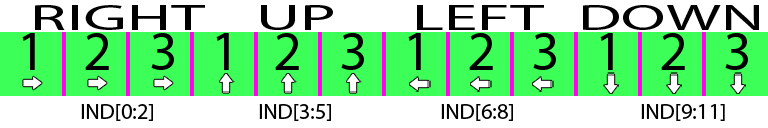
<style>
.page{position:relative;width:768px;height:128px;background:#ffffff}
.page>*{position:absolute;margin:0}
.t1{font:35.9px "MyriadPro-Regular";color:#000000;scale:1.89 1}
.t2{font:35.9px "MyriadPro-Regular";color:#000000;scale:1.81 1}
.t3{font:55.6px "MyriadPro-Regular";color:#000000}
.t4{font:22.3px "MyriadPro-Regular";color:#000000}
</style>
<div class="page">
<p class="t1" style="left:35px;top:5px;width:170px;height:25px">RIGHT</p>
<p class="t1" style="left:261px;top:5px;width:72px;height:25px">UP</p>
<p class="t1" style="left:417px;top:5px;width:127px;height:25px">LEFT</p>
<p class="t2" style="left:583px;top:5px;width:176px;height:25px">DOWN</p>
<p class="t3" style="left:22px;top:33px;width:13px;height:37px">1</p>
<p class="t3" style="left:85px;top:33px;width:24px;height:37px">2</p>
<p class="t3" style="left:151px;top:33px;width:23px;height:37px">3</p>
<p class="t3" style="left:216px;top:33px;width:13px;height:37px">1</p>
<p class="t3" style="left:275px;top:33px;width:24px;height:37px">2</p>
<p class="t3" style="left:341px;top:33px;width:23px;height:37px">3</p>
<p class="t3" style="left:408px;top:33px;width:13px;height:37px">1</p>
<p class="t3" style="left:469px;top:33px;width:24px;height:37px">2</p>
<p class="t3" style="left:533px;top:33px;width:23px;height:37px">3</p>
<p class="t3" style="left:600px;top:33px;width:13px;height:37px">1</p>
<p class="t3" style="left:661px;top:33px;width:24px;height:37px">2</p>
<p class="t3" style="left:725px;top:33px;width:23px;height:37px">3</p>
<p class="t4" style="left:81px;top:104px;width:72px;height:17px">IND[0:2]</p>
<p class="t4" style="left:259px;top:104px;width:72px;height:17px">IND[3:5]</p>
<p class="t4" style="left:441px;top:104px;width:72px;height:17px">IND[6:8]</p>
<p class="t4" style="left:641px;top:104px;width:84px;height:17px">IND[9:11]</p>
</div>
